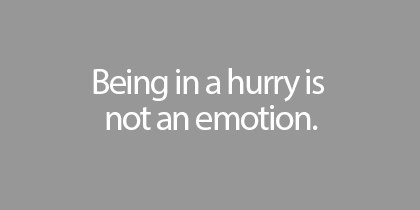
<style>
.page{position:relative;width:420px;height:210px;background:#979797}
.page>*{position:absolute;margin:0}
.t1{font:36px/36px "MyriadPro-Regular";letter-spacing:-0.05em;color:#ffffff}
</style>
<div class="page">
<p class="t1" style="left:93px;top:68px;width:231px;height:62px;text-align:center">Being in a hurry is <br>not an emotion.</p>
</div>
